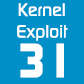
<style>
.page{position:relative;width:84px;height:84px;background:#0090c8}
.page>*{position:absolute;margin:0}
.t1{font:18px "ContinuumMedium";color:#ffffff}
.t2{font:48px "ContinuumBold";color:#ffffff}
</style>
<div class="page">
<p class="t1" style="left:17px;top:3px;width:51px;height:38px;text-align:center">Kernel<br>Exploit</p>
<p class="t2" style="left:20px;top:43px;width:44px;height:35px">31</p>
</div>
